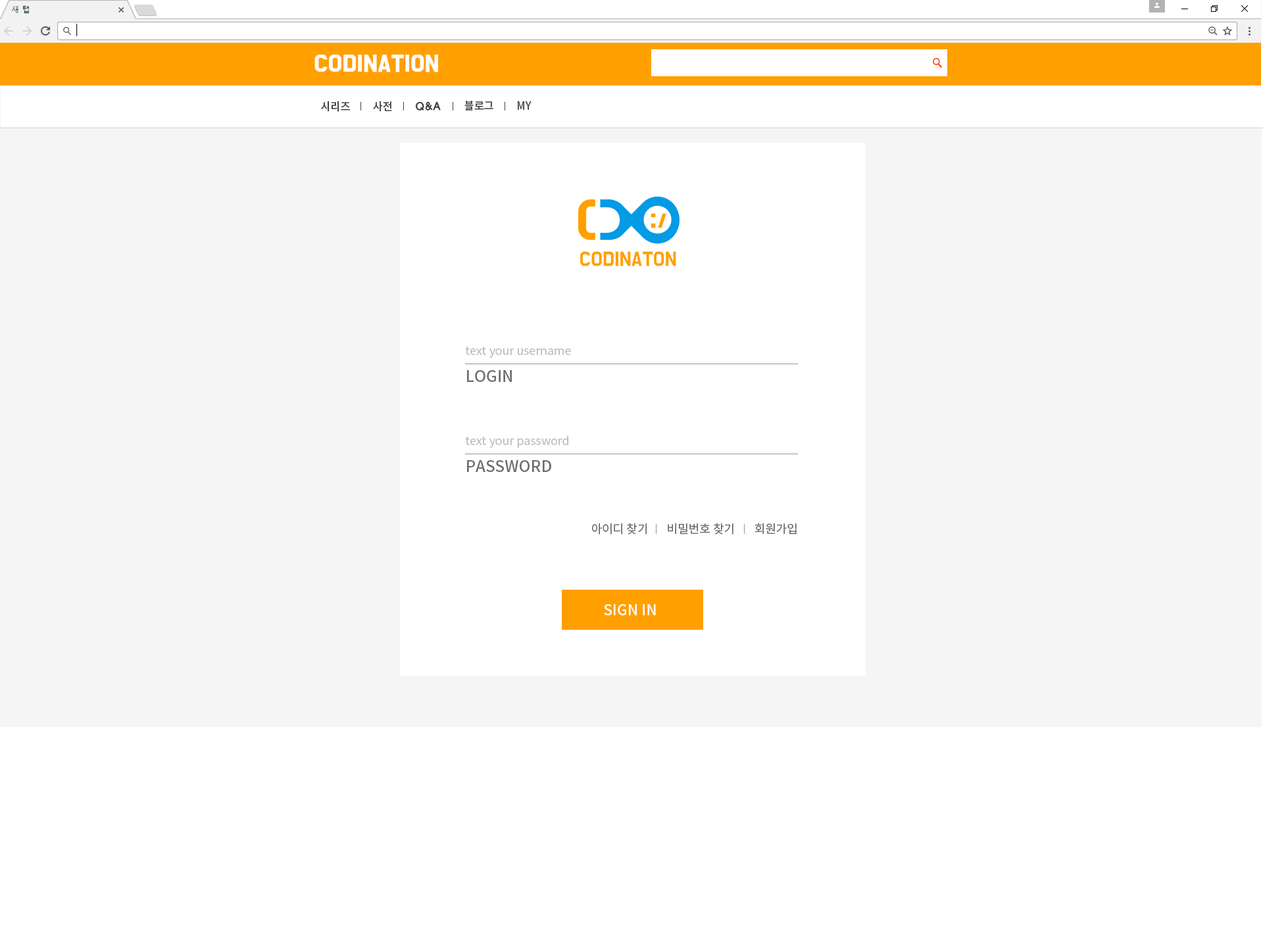
<style>
.page{position:relative;width:1263px;height:944px;background:#ffffff}
.page>*{position:absolute;margin:0}
.t1{font:19.7px "BMDoHyeon";color:#ffffff;font-weight:bold}
.t2{font:10.9px "NotoSansCJKkr-Medium";letter-spacing:-0.01em;color:#424242}
.t3{font:10.9px "HYwulB";letter-spacing:-0.025em;color:#424242}
.t4{font:11.8px "NotoSansCJKkr-DemiLight";color:#b9b9b9}
.t5{font:15.8px "NotoSansCJKkr-Medium";color:#6c6c6c}
.t6{font:11.8px "NotoSansCJKkr-Regular";color:#666666}
.t7{font:14.9px "NotoSansCJKkr-Medium";color:#ffffff}
</style>
<div class="page">
<p class="t1" style="left:314px;top:55px;width:124px;height:17px">CODINATION</p>
<p class="t2" style="left:321px;top:101px;width:29px;height:11px">시리즈</p>
<p class="t2" style="left:373px;top:101px;width:19px;height:11px">사전</p>
<p class="t3" style="left:415px;top:102px;width:26px;height:8px">Q&amp;A</p>
<p class="t2" style="left:464px;top:101px;width:29px;height:9px">블로그</p>
<p class="t2" style="left:518px;top:101px;width:13px;height:9px">MY</p>
<p class="t4" style="left:465px;top:347px;width:106px;height:11px">text your username</p>
<p class="t5" style="left:467px;top:370px;width:45px;height:12px">LOGIN</p>
<p class="t4" style="left:465px;top:435px;width:103px;height:13px">text your password</p>
<p class="t5" style="left:467px;top:460px;width:84px;height:12px">PASSWORD</p>
<p class="t6" style="left:592px;top:523px;width:54px;height:12px">아이디 찾기</p>
<p class="t6" style="left:668px;top:523px;width:65px;height:12px">비밀번호 찾기</p>
<p class="t6" style="left:754px;top:523px;width:42px;height:12px">회원가입</p>
<p class="t7" style="left:604px;top:604px;width:52px;height:12px">SIGN IN</p>
</div>
